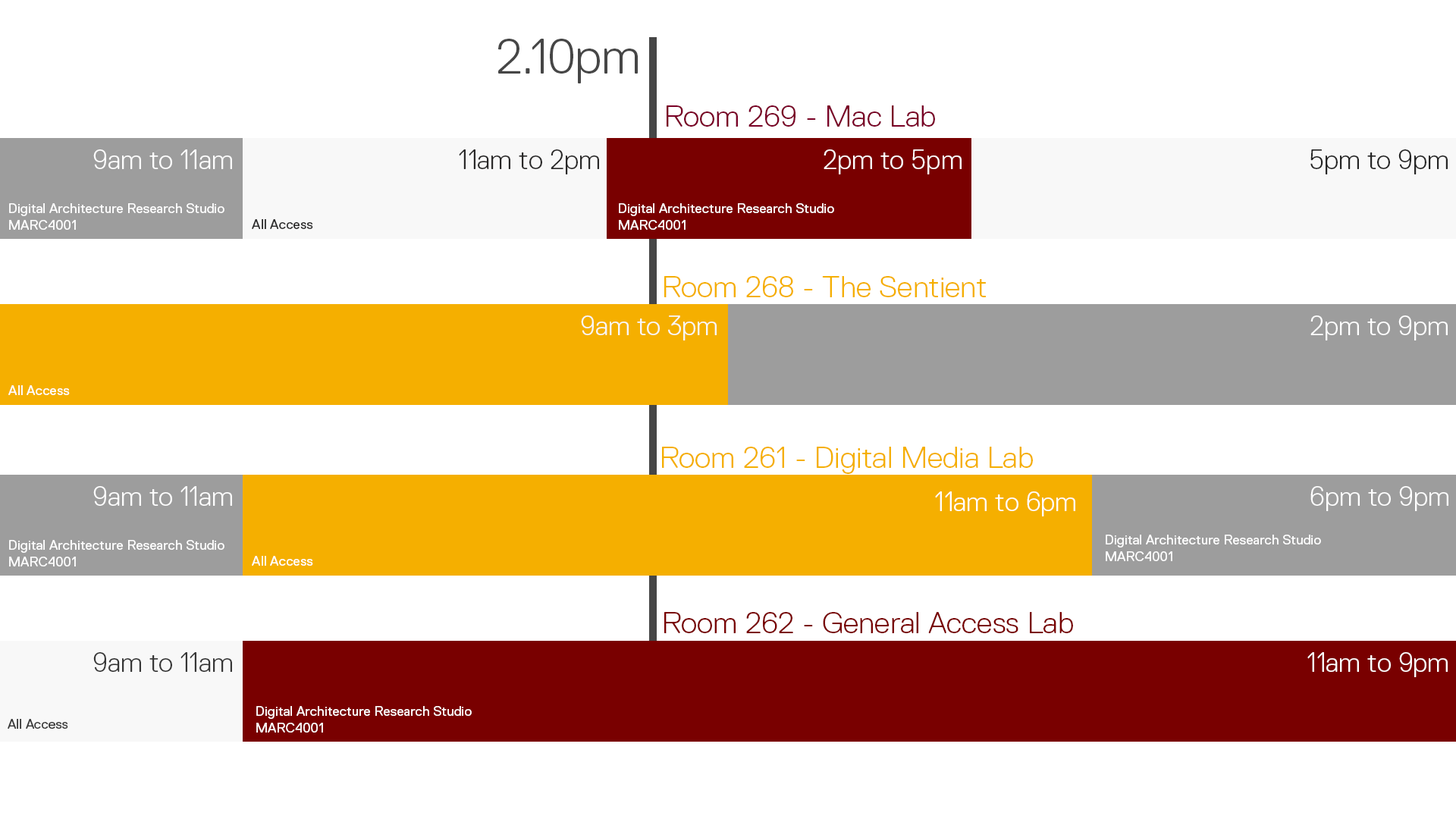
<style>
.page{position:relative;width:1456px;height:819px;background:#ffffff}
.page>*{position:absolute;margin:0}
.t1{font:49.6px "ReplicaStd-Light";color:#464646}
.t2{font:30.3px "ReplicaStd-Light";color:#7a0026}
.t3{font:27.3px "ReplicaStd-Light";color:#ffffff}
.t4{font:27.3px "ReplicaStd-Light";color:#2b2929}
.t5{font:27.3px "ReplicaStd-Light";color:#252525}
.t6{font:13.6px "ReplicaStd-Regular";color:#ffffff}
.t7{font:13.6px "ReplicaStd-Regular";color:#2a2929}
.t8{font:30.3px "ReplicaStd-Light";color:#f5af00}
.t9{font:27.3px "ReplicaStd-Light";color:#f8f8f8}
.t10{font:30.3px "ReplicaStd-Light";color:#790000}
.t11{font:27.3px "ReplicaStd-Light";color:#373737}
.t12{font:13.6px "ReplicaStd-Regular";color:#373737}
</style>
<div class="page">
<p class="t1" style="left:498px;top:39px;width:140px;height:44px">2.10pm</p>
<p class="t2" style="left:667px;top:105px;width:268px;height:22px">Room 269 - Mac Lab</p>
<p class="t3" style="left:93px;top:149px;width:139px;height:20px">9am to 11am</p>
<p class="t4" style="left:459px;top:149px;width:140px;height:25px">11am to 2pm</p>
<p class="t3" style="left:824px;top:149px;width:138px;height:25px">2pm to 5pm</p>
<p class="t5" style="left:1310px;top:149px;width:138px;height:25px">5pm to 9pm</p>
<p class="t6" style="left:9px;top:203px;width:215px;height:27px">Digital Architecture Research Studio<br>MARC4001</p>
<p class="t6" style="left:619px;top:203px;width:215px;height:27px">Digital Architecture Research Studio<br>MARC4001</p>
<p class="t7" style="left:252px;top:219px;width:61px;height:10px">All Access</p>
<p class="t8" style="left:664px;top:276px;width:322px;height:21px">Room 268 - The Sentient</p>
<p class="t9" style="left:581px;top:315px;width:136px;height:25px">9am to 3pm</p>
<p class="t3" style="left:1310px;top:315px;width:138px;height:25px">2pm to 9pm</p>
<p class="t6" style="left:8px;top:385px;width:62px;height:10px">All Access</p>
<p class="t8" style="left:662px;top:447px;width:371px;height:27px">Room 261 - Digital Media Lab</p>
<p class="t3" style="left:93px;top:486px;width:139px;height:20px">9am to 11am</p>
<p class="t3" style="left:935px;top:491px;width:140px;height:25px">11am to 6pm</p>
<p class="t3" style="left:1310px;top:486px;width:138px;height:25px">6pm to 9pm</p>
<p class="t6" style="left:9px;top:540px;width:215px;height:26px">Digital Architecture Research Studio<br>MARC4001</p>
<p class="t6" style="left:1106px;top:535px;width:215px;height:26px">Digital Architecture Research Studio<br>MARC4001</p>
<p class="t6" style="left:252px;top:556px;width:61px;height:10px">All Access</p>
<p class="t10" style="left:664px;top:612px;width:409px;height:21px">Room 262 - General Access Lab</p>
<p class="t11" style="left:93px;top:652px;width:139px;height:20px">9am to 11am</p>
<p class="t3" style="left:1307px;top:652px;width:141px;height:25px">11am to 9pm</p>
<p class="t6" style="left:256px;top:706px;width:216px;height:27px">Digital Architecture Research Studio<br>MARC4001</p>
<p class="t12" style="left:8px;top:719px;width:60px;height:10px">All Access</p>
</div>
